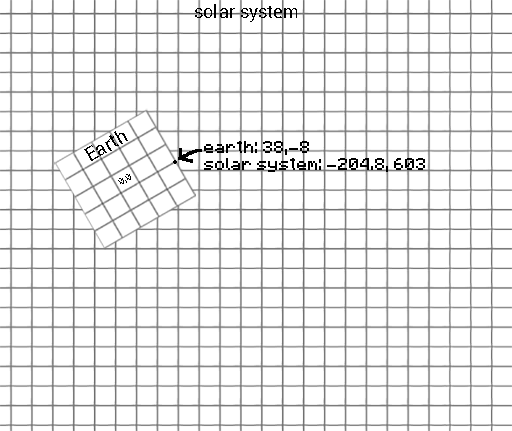
<style>
.page{position:relative;width:512px;height:431px;background:#ffffff}
.page>*{position:absolute;margin:0}
.t1{font:18.3px "Roboto-Regular";color:#000000}
.t2{font:14px "Minecraft";color:#000000}
.t3{font:7.5px "Minecraft";color:#000000}
</style>
<div class="page">
<p class="t1" style="left:195px;top:4px;width:102px;height:18px">solar system</p>
<p class="t1" style="left:84px;top:131px;width:44px;height:30px;rotate:-30deg">Earth</p>
<p class="t2" style="left:204px;top:141px;width:221px;height:31px">earth: 38,-8<br>solar system: -204.8, 603</p>
<p class="t3" style="left:118px;top:174px;width:13px;height:10px;rotate:-30deg">0,0</p>
</div>
